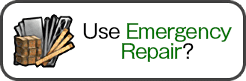
<style>
.page{position:relative;width:246px;height:81px;background:#ffffff}
.page>*{position:absolute;margin:0}
.t1{font:20px/20px "GothicMB101Pro-Regular";letter-spacing:-0.04em;color:#037302}
.t2{font:20px/20px "GothicMB101Pro-Regular";letter-spacing:-0.04em;color:#000000}
</style>
<div class="page">
<p class="t1" style="left:83px;top:23px;width:149px;height:39px;text-align:center"><span class="t2">Use </span>Emergency<br>Repair<span class="t2">?</span></p>
</div>
